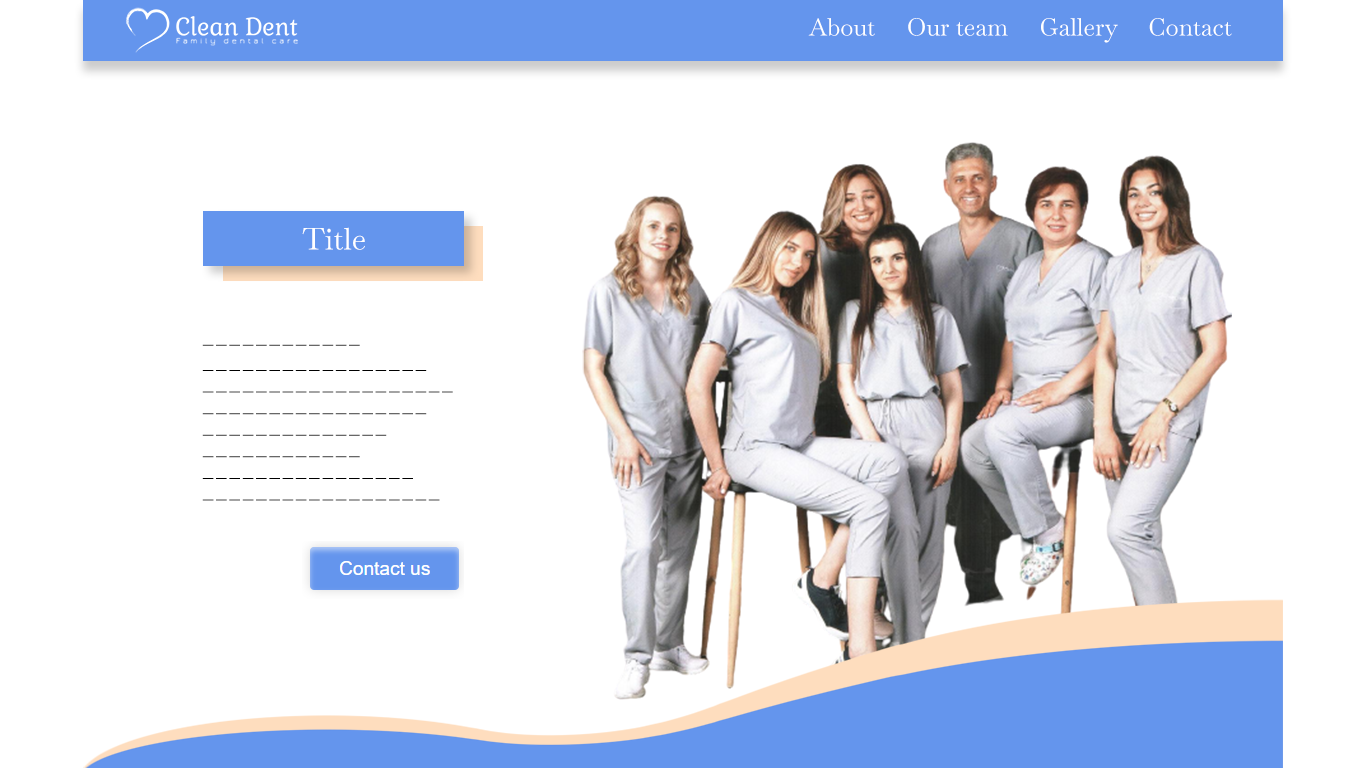
<style>
.page{position:relative;width:1366px;height:768px;background:#ffffff}
.page>*{position:absolute;margin:0}
.t1{font:24px "Baskervville-Regular";color:#ffffff}
.t2{font:30px "Baskervville-Regular";color:#ffffff}
.t3{font:24px/3.6px "Baskervville-Regular";color:#000000}
</style>
<div class="page">
<p class="t1" style="left:808px;top:18px;width:424px;height:25px">About     Our team     Gallery     Contact</p>
<p class="t2" style="left:302px;top:227px;width:63px;height:23px">Title</p>
<p class="t3" style="left:202px;top:344px;width:251px;height:157px">____________<br><br><br><br><br><br><br>_________________<br><br><br><br><br><br>___________________<br><br><br><br><br><br>_________________<br><br><br><br><br><br>______________<br><br><br><br><br><br>____________<br><br><br><br><br><br>________________<br><br><br><br><br><br>__________________</p>
</div>
